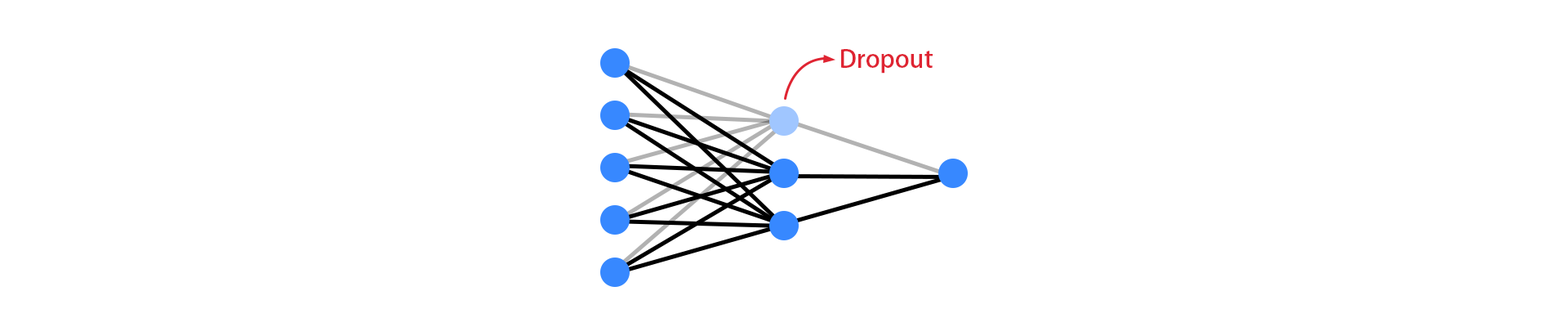
<style>
.page{position:relative;width:1568px;height:327px;background:#ffffff}
.page>*{position:absolute;margin:0}
.t1{font:24.5px "AdobeHeitiStd-Regular";color:#df2432}
</style>
<div class="page">
<p class="t1" style="left:841px;top:49px;width:92px;height:25px">Dropout</p>
</div>
